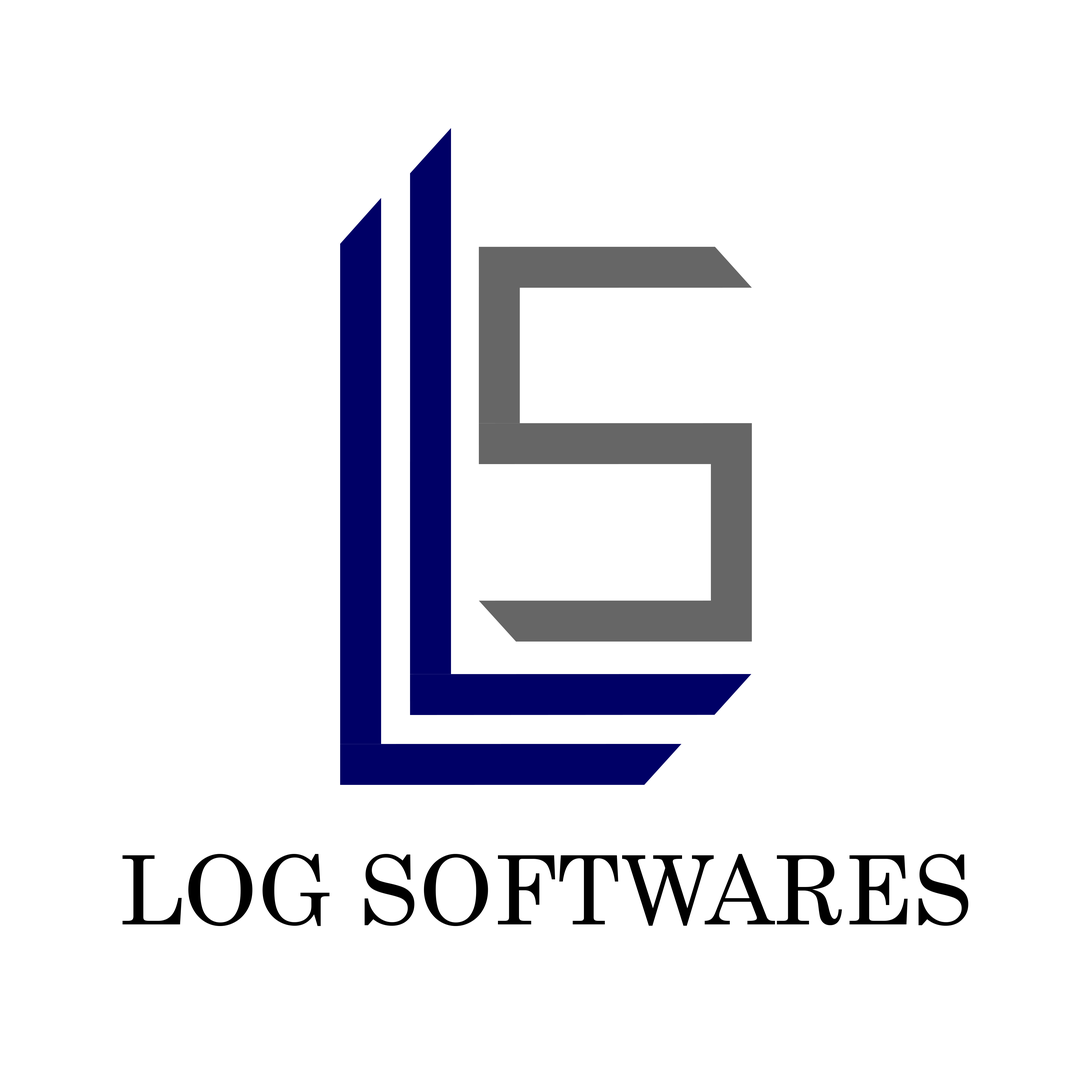
<style>
.page{position:relative;width:1092px;height:1092px;background:#ffffff}
.page>*{position:absolute;margin:0}
.t1{font:95.5px "Century";color:#000000}
</style>
<div class="page">
<p class="t1" style="left:122px;top:854px;width:846px;height:72px">LOG SOFTWARES</p>
</div>
